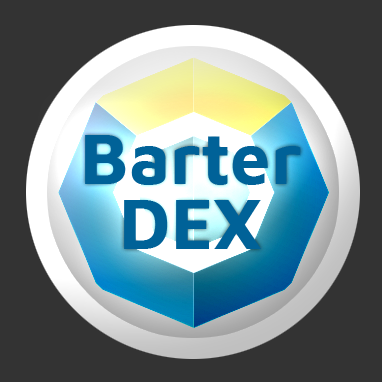
<style>
.page{position:relative;width:382px;height:382px;background:#333333}
.page>*{position:absolute;margin:0}
.t1{font:72px "MavenPro-Bold";color:#006298}
</style>
<div class="page">
<p class="t1" style="left:85px;top:135px;width:216px;height:50px">Barter</p>
<p class="t1" style="left:124px;top:200px;width:138px;height:49px">DEX</p>
</div>
